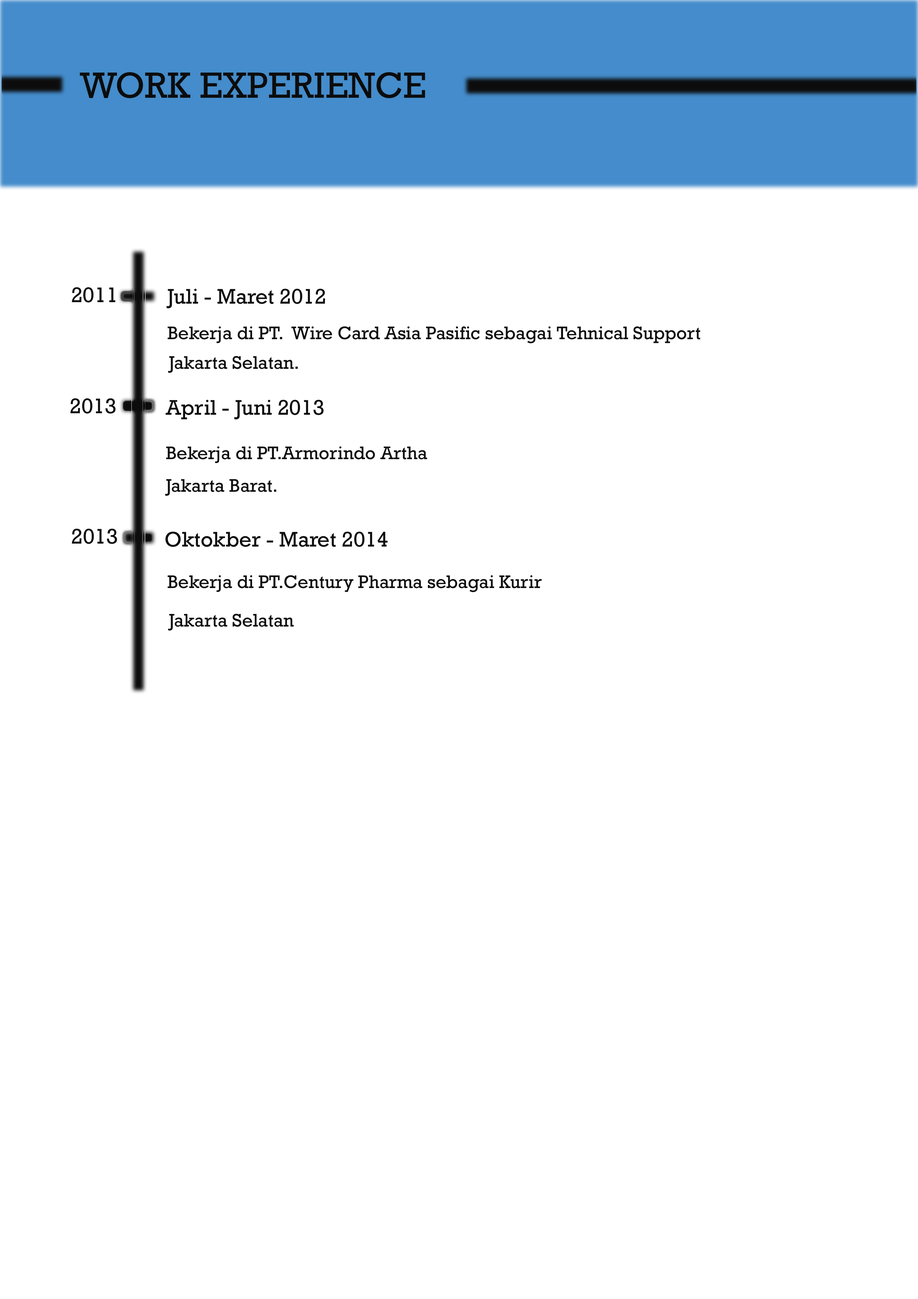
<style>
.page{position:relative;width:918px;height:1299px;background:#ffffff}
.page>*{position:absolute;margin:0}
.t1{font:37px "Rockwell";color:#0c0c0c}
.t2{font:21.6px "Rockwell";color:#0c0c0c}
.t3{font:18.5px "Rockwell";color:#0c0c0c}
</style>
<div class="page">
<p class="t1" style="left:80px;top:72px;width:345px;height:26px">WORK EXPERIENCE</p>
<p class="t2" style="left:72px;top:287px;width:44px;height:15px">2011</p>
<p class="t2" style="left:167px;top:288px;width:158px;height:20px">Juli - Maret 2012</p>
<p class="t3" style="left:168px;top:326px;width:532px;height:17px">Bekerja di PT.  Wire Card Asia Pasific sebagai Tehnical Support</p>
<p class="t3" style="left:168px;top:356px;width:130px;height:17px">Jakarta Selatan.</p>
<p class="t2" style="left:70px;top:398px;width:46px;height:16px">2013</p>
<p class="t3" style="left:165px;top:399px;width:262px;height:64px"><span class="t2">April - Juni 2013<br></span><br>Bekerja di PT.Armorindo Artha</p>
<p class="t3" style="left:165px;top:479px;width:112px;height:17px">Jakarta Barat.</p>
<p class="t2" style="left:72px;top:528px;width:45px;height:16px">2013</p>
<p class="t2" style="left:165px;top:531px;width:223px;height:16px">Oktokber - Maret 2014</p>
<p class="t3" style="left:168px;top:575px;width:374px;height:17px">Bekerja di PT.Century Pharma sebagai Kurir</p>
<p class="t3" style="left:168px;top:613px;width:126px;height:17px">Jakarta Selatan</p>
</div>
